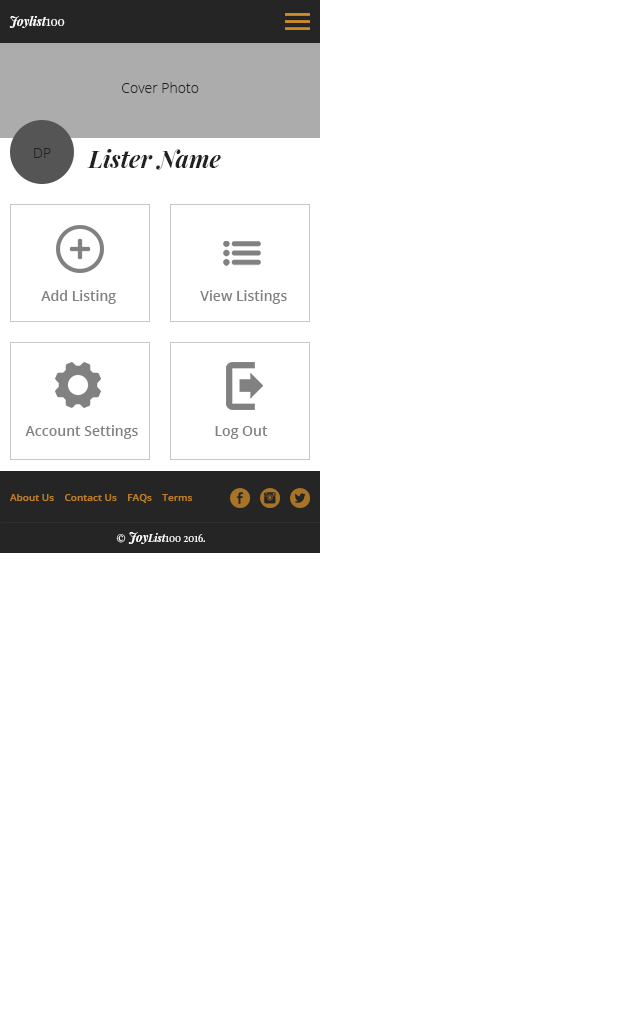
<style>
.page{position:relative;width:640px;height:1024px;background:#ffffff}
.page>*{position:absolute;margin:0}
.t1{font:12px "PlayfairDisplay-BoldItalic";color:#ffffff}
.t2{font:12px "PlayfairDisplay-Regular";color:#ffffff}
.t3{font:14px "OpenSans-Light";color:#212121}
.t4{font:24px "PlayfairDisplay-BoldItalic";color:#212121}
.t5{font:14px "OpenSans-Semibold";color:#818181}
.t6{font:10px "OpenSans-Semibold";color:#bd7d26}
.t7{font:10px "PlayfairDisplay-Regular";color:#ffffff}
.t8{font:10px "PlayfairDisplay-BoldItalic";color:#ffffff}
</style>
<div class="page">
<p class="t1" style="left:9px;top:16px;width:56px;height:12px">Joylist<span class="t2">100</span></p>
<p class="t3" style="left:122px;top:82px;width:77px;height:11px">Cover Photo</p>
<p class="t3" style="left:34px;top:148px;width:17px;height:10px">DP</p>
<p class="t4" style="left:87px;top:149px;width:134px;height:21px">Lister Name</p>
<p class="t5" style="left:41px;top:290px;width:75px;height:14px">Add Listing</p>
<p class="t5" style="left:200px;top:290px;width:87px;height:14px">View Listings</p>
<p class="t5" style="left:25px;top:425px;width:113px;height:14px">Account Settings</p>
<p class="t5" style="left:215px;top:426px;width:53px;height:13px">Log Out</p>
<p class="t6" style="left:10px;top:494px;width:182px;height:9px">About Us    Contact Us    FAQs    Terms</p>
<p class="t7" style="left:116px;top:532px;width:89px;height:12px">© <span class="t1">Joy</span><span class="t8">List</span>100 2016.</p>
</div>
